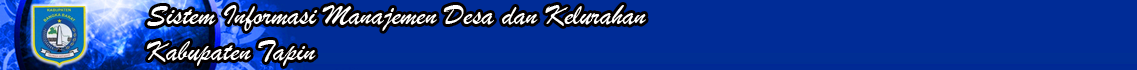
<style>
.page{position:relative;width:1137px;height:70px;background:#002c97}
.page>*{position:absolute;margin:0}
.t1{font:29.6px "BrushScriptMT";color:#ffffff}
</style>
<div class="page">
<p class="t1" style="left:146px;top:5px;width:500px;height:61px">Sistem Informasi Manajemen Desa dan Kelurahan<br>Kabupaten Tapin</p>
</div>
